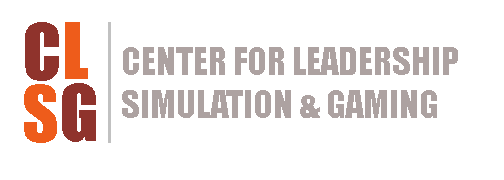
<style>
.page{position:relative;width:504px;height:180px;background:#ffffff}
.page>*{position:absolute;margin:0}
.t1{font:72px "Impact";color:#8f332c}
.t2{font:72px "Impact";color:#ee5c1b}
.t3{font:36px "Impact";color:#ada2a1}
</style>
<div class="page">
<p class="t1" style="left:25px;top:22px;width:34px;height:59px">C</p>
<p class="t2" style="left:65px;top:22px;width:23px;height:57px">L</p>
<p class="t3" style="left:122px;top:47px;width:336px;height:71px">CENTER FOR LEADERSHIP<br>SIMULATION &amp; GAMING</p>
<p class="t2" style="left:24px;top:84px;width:33px;height:59px">S</p>
<p class="t1" style="left:62px;top:83px;width:34px;height:59px">G</p>
</div>
